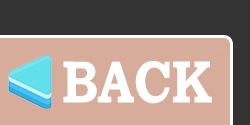
<style>
.page{position:relative;width:250px;height:125px;background:#d7ac9b}
.page>*{position:absolute;margin:0}
.t1{font:60px "WATSON";color:#ffffff;scale:0.84 1}
</style>
<div class="page">
<p class="t1" style="left:63px;top:61px;width:149px;height:43px">BACK</p>
</div>
